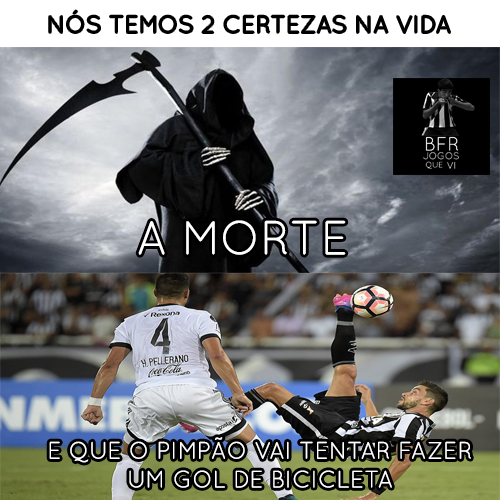
<style>
.page{position:relative;width:500px;height:500px}
.page>*{position:absolute;margin:0}
.t1{font:24px "QuicksandBook-Regular";color:#000000}
.t2{font:48px "QuicksandBook-Regular";color:#ffffff}
.t3{font:24px "QuicksandBook-Regular";color:#ffffff}
</style>
<div class="page">
<p class="t1" style="left:49px;top:10px;width:401px;height:23px">NÓS TEMOS 2 CERTEZAS NA VIDA</p>
<p class="t2" style="left:138px;top:220px;width:208px;height:35px">A MORTE</p>
<p class="t3" style="left:49px;top:437px;width:422px;height:51px;text-align:center">E QUE O PIMPÃO VAI TENTAR FAZER<br>UM GOL DE BICICLETA</p>
</div>
